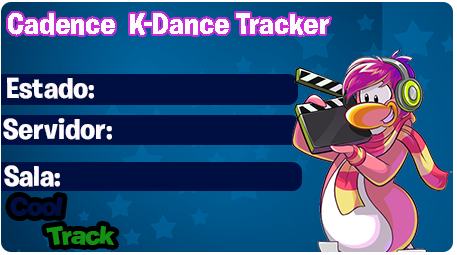
<style>
.page{position:relative;width:457px;height:255px}
.page>*{position:absolute;margin:0}
.t1{font:30px "BurbankBigRegular-Bold";color:#fcfcfe}
.t2{font:29px "BurbankBigRegular-Bold";color:#fdfafe}
</style>
<div class="page">
<p class="t1" style="left:8px;top:13px;width:322px;height:22px">Cadence  K-Dance Tracker</p>
<p class="t2" style="left:7px;top:77px;width:87px;height:22px">Estado:</p>
<p class="t2" style="left:3px;top:118px;width:109px;height:22px">Servidor:</p>
<p class="t2" style="left:4px;top:165px;width:56px;height:22px">Sala:</p>
</div>
